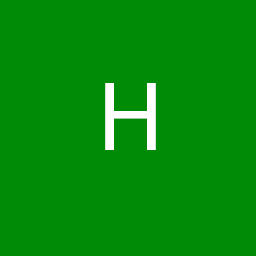
<style>
.page{position:relative;width:256px;height:256px;background:#008b07}
.page>*{position:absolute;margin:0}
.t1{font:100px "MyriadPro-Regular";color:#ffffff}
</style>
<div class="page">
<p class="t1" style="left:105px;top:83px;width:51px;height:67px">H</p>
</div>
